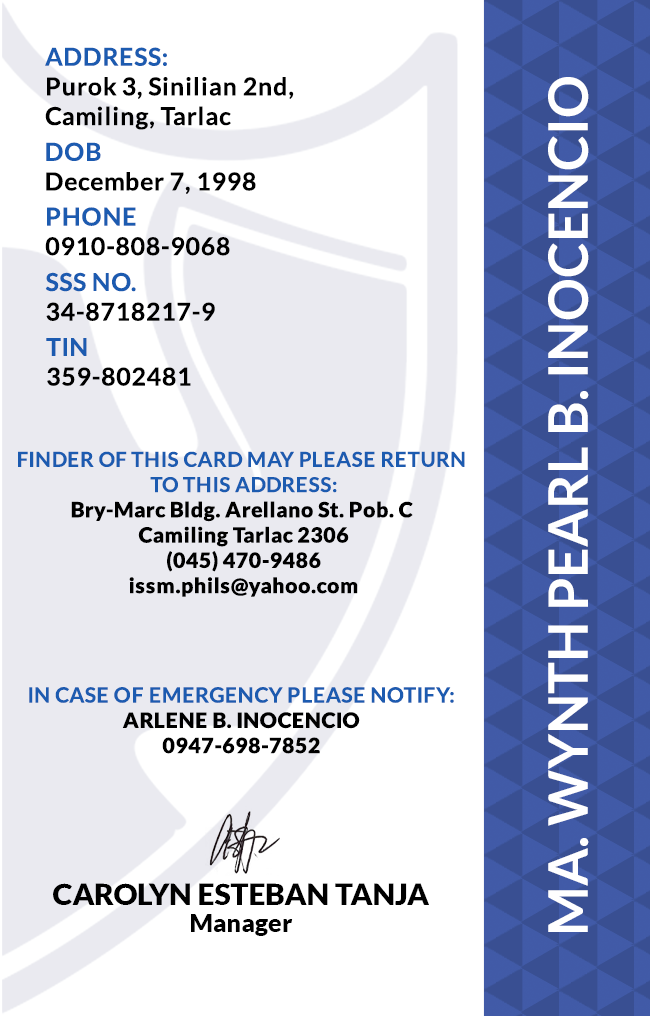
<style>
.page{position:relative;width:650px;height:1016px;background:#ffffff}
.page>*{position:absolute;margin:0}
.t1{font:24.7px/29.6px "Lato-Bold";letter-spacing:0.025em;color:#000000}
.t2{font:54.2px "Lato-Bold";color:#ffffff}
.t3{font:24.7px/29.6px "Lato-Bold";letter-spacing:0.025em}
.t4{font:21.1px "Lato-Black";letter-spacing:0.025em}
.t5{font:20.5px/25.3px "Lato-Bold";letter-spacing:0.025em;text-transform:uppercase}
.t6{font:21.1px/25.3px "Lato-Bold";letter-spacing:0.025em}
.t7{font:29.5px "Lato-Black";color:#000000}
.t8{font:25px "Lato-Black";color:#000000}
</style>
<div class="page">
<p class="t1" style="left:45px;top:47px;width:249px;height:83px">ADDRESS:<br>Purok 3, Sinilian 2nd, <br>Camiling, Tarlac</p>
<p class="t2" style="left:548px;top:77px;width:41px;height:855px;rotate:-90deg">MA. WYNTH PEARL B. INOCENCIO</p>
<p class="t1" style="left:46px;top:142px;width:210px;height:52px">DOB<br>December 7, 1998</p>
<p class="t3" style="left:45px;top:207px;width:185px;height:49px">PHONE <br>0910-808-9068</p>
<p class="t3" style="left:45px;top:272px;width:170px;height:49px">SSS NO.<br>34-8718217-9</p>
<p class="t1" style="left:46px;top:338px;width:145px;height:48px">TIN<br>359-802481</p>
<p class="t4" style="left:18px;top:451px;width:447px;height:146px;text-align:center"><span class="t5">Finder of this card may please return <br>to this address:<br></span>Bry-Marc Bldg. Arellano St. Pob. C <br>Camiling Tarlac 2306<br>(045) 470-9486<br>issm.phils@yahoo.com</p>
<p class="t6" style="left:29px;top:687px;width:425px;height:67px;text-align:center">IN CASE OF EMERGENCY PLEASE NOTIFY:<br><span class="t4">ARLENE B. INOCENCIO<br>0947-698-7852</span></p>
<p class="t7" style="left:53px;top:883px;width:376px;height:22px">CAROLYN ESTEBAN TANJA</p>
<p class="t8" style="left:191px;top:914px;width:102px;height:22px">Manager</p>
</div>
